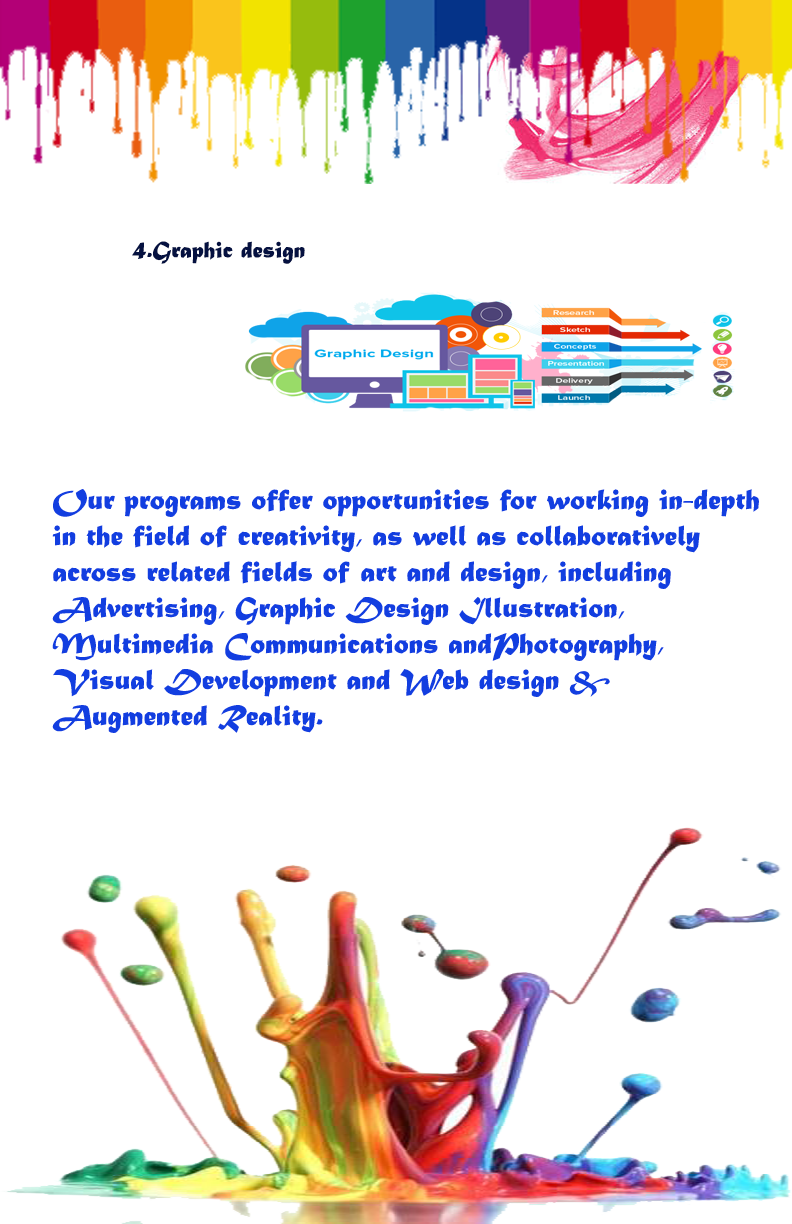
<style>
.page{position:relative;width:792px;height:1224px;background:#ffffff}
.page>*{position:absolute;margin:0}
.t1{font:24px "MaturaMTScriptCapitals";color:#051140}
.t2{font:30px "MaturaMTScriptCapitals";color:#123ee0}
</style>
<div class="page">
<p class="t1" style="left:132px;top:241px;width:173px;height:23px">4.Graphic design</p>
<p class="t2" style="left:52px;top:489px;width:707px;height:244px">Our programs offer opportunities for working in-depth<br>in the field of creativity, as well as collaboratively <br>across related fields of art and design, including <br>Advertising, Graphic Design Illustration, <br>Multimedia Communications andPhotography, <br>Visual Development and Web design &amp; <br>Augmented Reality.</p>
</div>
